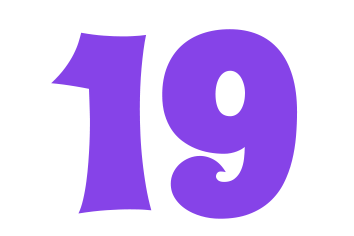
<style>
.page{position:relative;width:354px;height:236px;background:#ffffff}
.page>*{position:absolute;margin:0}
.t1{font:250px "SpicyRice-Regular";color:#8643e8}
</style>
<div class="page">
<p class="t1" style="left:51px;top:29px;width:247px;height:190px">19</p>
</div>
